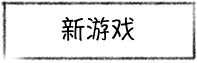
<style>
.page{position:relative;width:197px;height:63px;background:#ffffff}
.page>*{position:absolute;margin:0}
.t1{font:25px "-lfzbbaa";color:#000000}
</style>
<div class="page">
<p class="t1" style="left:61px;top:17px;width:74px;height:24px">新游戏</p>
</div>
